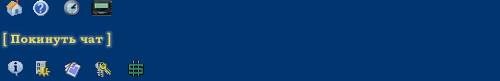
<style>
.page{position:relative;width:500px;height:81px;background:#003570}
.page>*{position:absolute;margin:0}
.t1{font:12px "BookmanOldStyle-Bold";letter-spacing:0.009em;color:#f3db5d}
.t2{font:14.4px "BookmanOldStyle-Bold";letter-spacing:0.009em;color:#f3db5d;scale:0.83 1}
</style>
<div class="page">
<p class="t1" style="left:3px;top:32px;width:108px;height:15px"><span class="t2">[</span> Покинуть чат <span class="t2">]</span></p>
</div>
